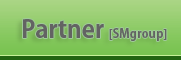
<style>
.page{position:relative;width:181px;height:60px}
.page>*{position:absolute;margin:0}
.t1{font:12px "AdobeGothicStd-Bold";color:#636363}
.t2{font:24px "AdobeGothicStd-Bold";color:#636363}
</style>
<div class="page">
<p class="t1" style="left:23px;top:19px;width:144px;height:22px"><span class="t2">Partner </span>[SMgroup]</p>
</div>
